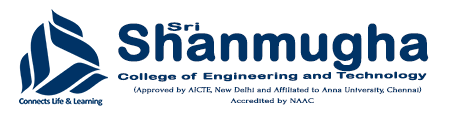
<style>
.page{position:relative;width:454px;height:120px;background:#ffffff}
.page>*{position:absolute;margin:0}
.t1{font:49.3px "ArialRoundedMTBold";color:#003366;font-weight:bold;scale:1.06 1}
.t2{font:10.8px "ArialRoundedMTBold";color:#003366;font-weight:bold;scale:2.17 1}
.t3{font:8.8px "ArialRoundedMTBold";color:#003366;font-weight:bold;scale:1.75 1}
.t4{font:7.3px "Forum";color:#003366;font-weight:bold;scale:1.24 1}
.t5{font:6.7px "Forum";color:#003366;font-weight:bold;scale:1.42 1}
</style>
<div class="page">
<p class="t1" style="left:118px;top:23px;width:311px;height:49px">Shanmugha</p>
<p class="t2" style="left:167px;top:22px;width:33px;height:9px">Sri</p>
<p class="t3" style="left:118px;top:71px;width:309px;height:11px">College of Engineering and Technology</p>
<p class="t4" style="left:134px;top:86px;width:288px;height:8px">(Approved by AICTE, New Delhi and Affiliated to Anna University, Chennai)</p>
<p class="t5" style="left:230px;top:98px;width:84px;height:7px">Accredited by NAAC</p>
</div>
